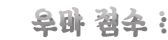
<style>
.page{position:relative;width:168px;height:40px;background:#ffffff}
.page>*{position:absolute;margin:0}
.t1{font:26.9px "SDKukdetopokki-bBd";letter-spacing:0.08em}
</style>
<div class="page">
<p class="t1" style="left:31px;top:6px;width:134px;height:26px">우마 점수 :</p>
</div>
